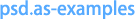
<style>
.page{position:relative;width:135px;height:19px;background:#ffffff}
.page>*{position:absolute;margin:0}
.t1{font:18px "AdobeHeitiStd-Regular";color:#56aaff}
</style>
<div class="page">
<p class="t1" style="left:0px;top:0px;width:135px;height:19px">psd.as-examples</p>
</div>
